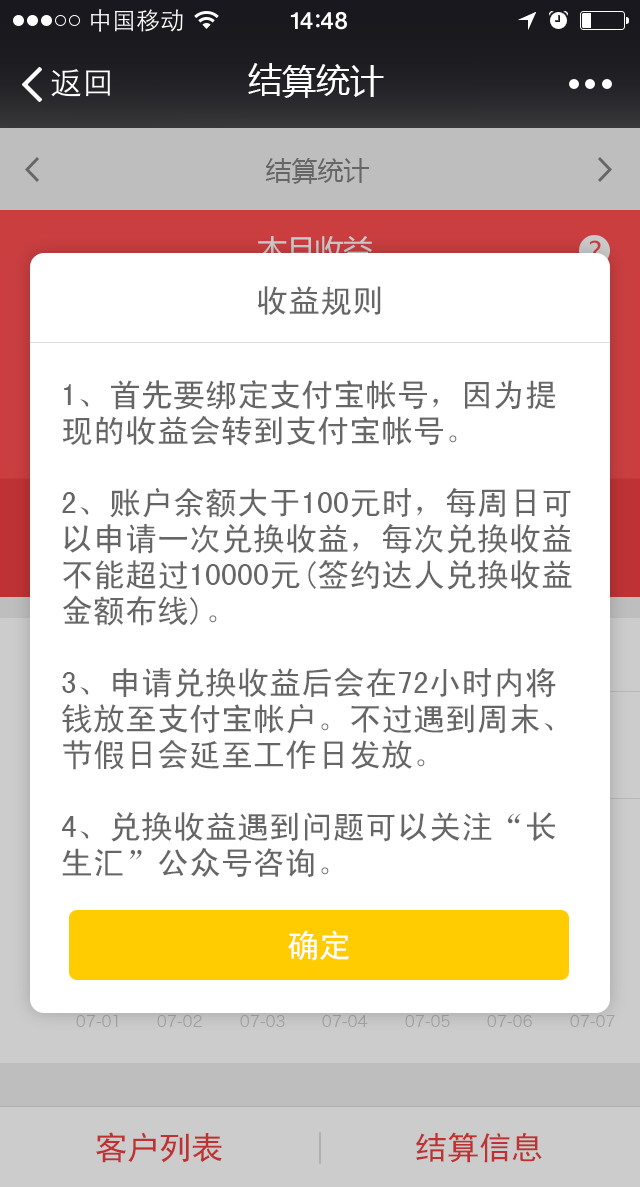
<style>
.page{position:relative;width:640px;height:1187px;background:#ffffff}
.page>*{position:absolute;margin:0}
.t1{font:34px "MicrosoftYaHei";color:#ffffff}
.t2{font:26px "MicrosoftYaHei";color:#666666}
.t3{font:30px "MicrosoftYaHei";letter-spacing:-0.05em}
.t4{font:28px "MicrosoftYaHei";color:#c63d3f}
.t5{font:32px "SimHei";color:#666666}
.t6{font:32px/36px "SimHei";color:#666666}
.t7{font:32px "SimHei";color:#ffffff}
.t8{font:15.3px "HiraginoSansGB-W3";color:#9b9b9b}
.t9{font:15.3px "HiraginoSansGB-W3";color:#9e9e9e}
.t10{font:15.3px "HiraginoSansGB-W3";color:#9c9c9c}
.t11{font:32px "SimHei";color:#be3234}
</style>
<div class="page">
<p class="t1" style="left:248px;top:63px;width:136px;height:35px">结算统计</p>
<p class="t2" style="left:265px;top:158px;width:104px;height:26px">结算统计</p>
<p class="t3" style="left:257px;top:236px;width:116px;height:30px">本月收益</p>
<p class="t4" style="left:590px;top:240px;width:11px;height:23px">?</p>
<p class="t5" style="left:257px;top:286px;width:124px;height:30px">收益规则</p>
<p class="t6" style="left:62px;top:380px;width:510px;height:498px">1、首先要绑定支付宝帐号，因为提现的收益会转到支付宝帐号。<br><br>2、账户余额大于100元时，每周日可以申请一次兑换收益，每次兑换收益不能超过10000元(签约达人兑换收益金额布线)。<br><br>3、申请兑换收益后会在72小时内将钱放至支付宝帐户。不过遇到周末、节假日会延至工作日发放。<br><br>4、兑换收益遇到问题可以关注“长生汇”公众号咨询。</p>
<p class="t7" style="left:288px;top:930px;width:62px;height:31px">确定</p>
<p class="t8" style="left:76px;top:1015px;width:42px;height:12px">07-01</p>
<p class="t9" style="left:157px;top:1015px;width:45px;height:12px">07-02</p>
<p class="t8" style="left:240px;top:1015px;width:45px;height:12px">07-03</p>
<p class="t9" style="left:322px;top:1015px;width:46px;height:12px">07-04</p>
<p class="t8" style="left:405px;top:1015px;width:45px;height:12px">07-05</p>
<p class="t10" style="left:487px;top:1015px;width:45px;height:12px">07-06</p>
<p class="t9" style="left:570px;top:1015px;width:45px;height:12px">07-07</p>
<p class="t11" style="left:96px;top:1132px;width:126px;height:31px">客户列表</p>
<p class="t11" style="left:416px;top:1132px;width:126px;height:31px">结算信息</p>
</div>
